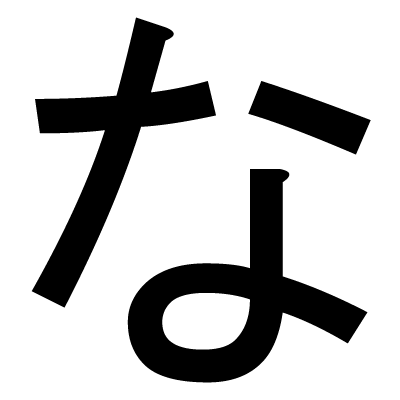
<style>
.page{position:relative;width:400px;height:400px;background:#ffffff}
.page>*{position:absolute;margin:0}
.t1{font:416.7px "MS-PGothic";color:#000000}
</style>
<div class="page">
<p class="t1" style="left:31px;top:17px;width:340px;height:366px">な</p>
</div>
